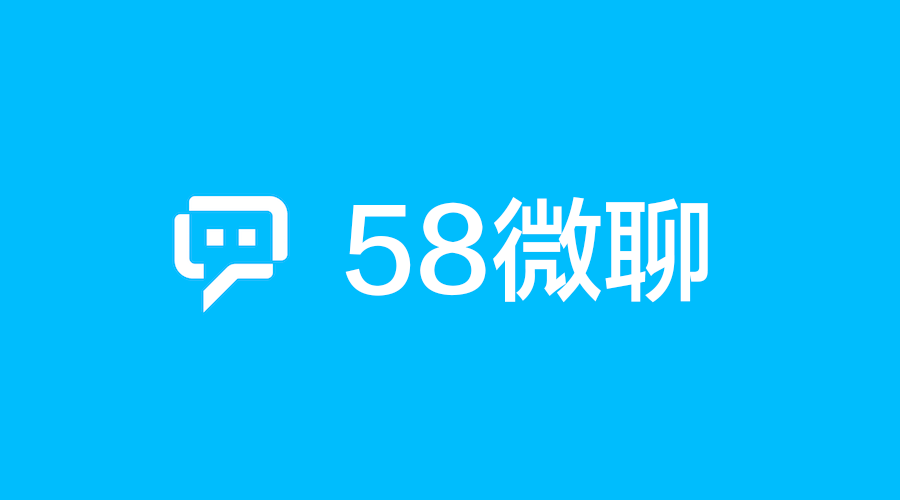
<style>
.page{position:relative;width:900px;height:500px;background:#00bdfd}
.page>*{position:absolute;margin:0}
.t1{font:112px "FZLTZHK--GBK1-0";color:#ffffff}
</style>
<div class="page">
<p class="t1" style="left:345px;top:197px;width:363px;height:106px">58微聊</p>
</div>
